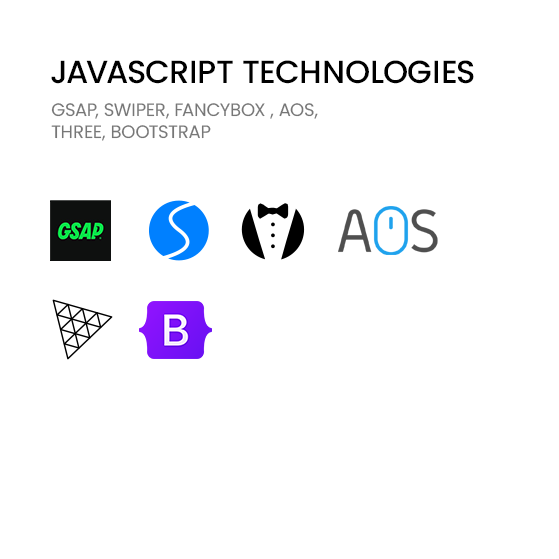
<style>
.page{position:relative;width:559px;height:559px;background:#ffffff}
.page>*{position:absolute;margin:0}
.t1{font:32px "Poppins-Medium";color:#000000;text-transform:uppercase}
.t2{font:18px/22px "Poppins-Regular";color:#777777;text-transform:uppercase}
</style>
<div class="page">
<p class="t1" style="left:51px;top:60px;width:423px;height:24px">JavaScript Technologies</p>
<p class="t2" style="left:51px;top:103px;width:267px;height:38px;text-align:justify">Gsap, Swiper, fancybox , AOS, <br>Three, bootstrap</p>
</div>
